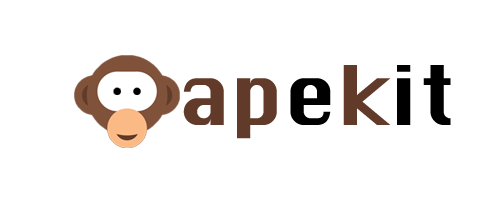
<style>
.page{position:relative;width:500px;height:200px;background:#ffffff}
.page>*{position:absolute;margin:0}
.t1{font:80px "Krungthep";color:#613a29}
.t2{font:80px "Krungthep";color:#000000}
</style>
<div class="page">
<p class="t1" style="left:183px;top:65px;width:268px;height:74px">ap<span class="t2">e</span>k<span class="t2">it</span></p>
</div>
